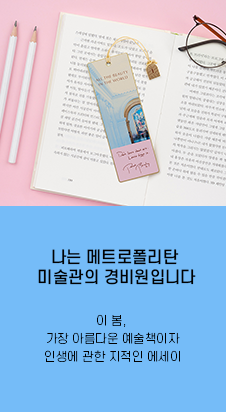
<style>
.page{position:relative;width:226px;height:412px;background:#75bcf8}
.page>*{position:absolute;margin:0}
.t1{font:16px/20px "S-CoreDream-5Medium";color:#010101}
.t2{font:12px/18px "S-CoreDream-2ExtraLight";color:#010101}
</style>
<div class="page">
<p class="t1" style="left:38px;top:249px;width:158px;height:36px;text-align:center">나는 메트로폴리탄 <br>미술관의 경비원입니다</p>
<p class="t2" style="left:45px;top:314px;width:135px;height:48px;text-align:center">이 봄, <br>가장 아름다운 예술책이자<br>인생에 관한 지적인 에세이</p>
</div>
